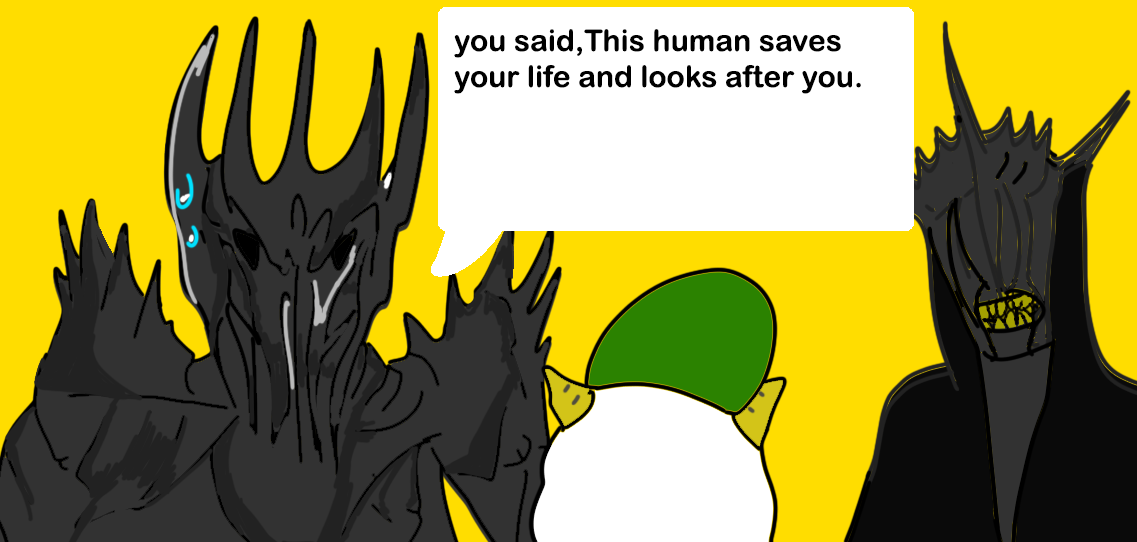
<style>
.page{position:relative;width:1137px;height:542px;background:#ffdd00}
.page>*{position:absolute;margin:0}
.t1{font:30px "ArialRoundedMTBold";color:#000000}
</style>
<div class="page">
<p class="t1" style="left:454px;top:29px;width:407px;height:65px">you said,This human saves <br>your life and looks after you.</p>
</div>
